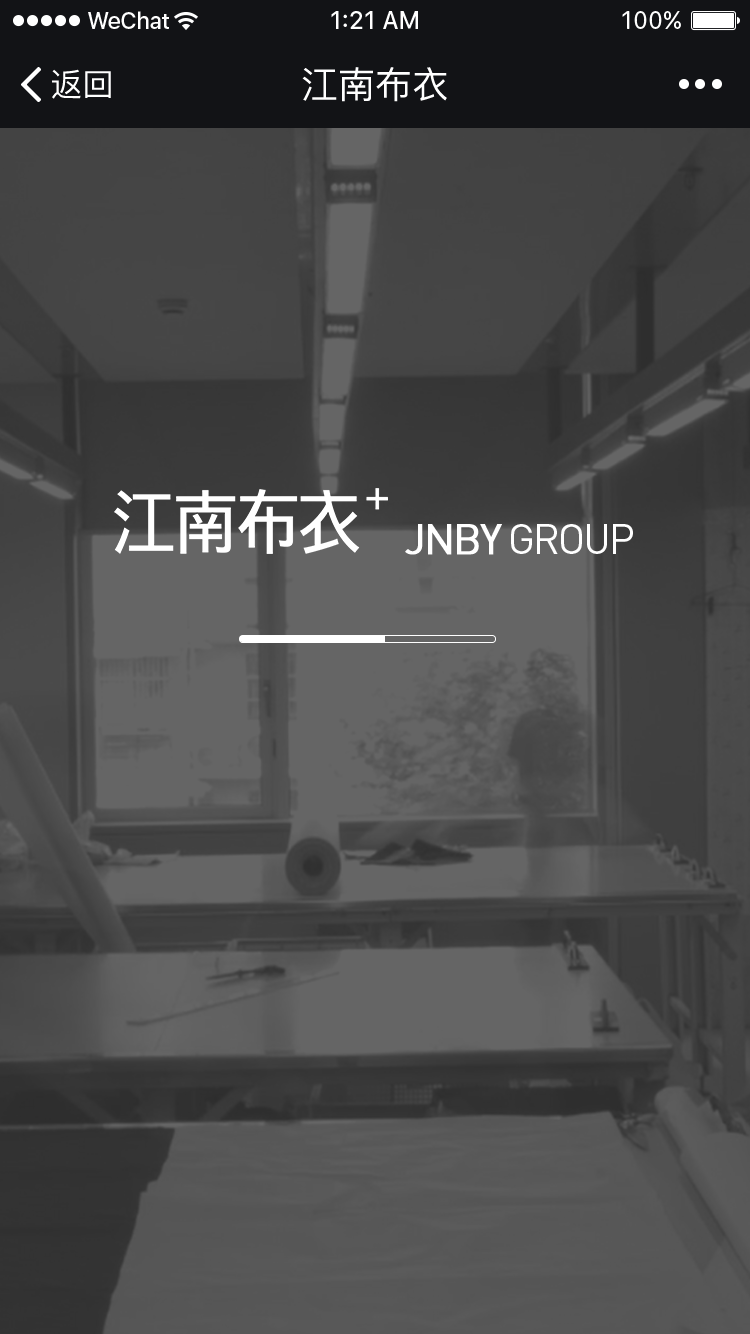
<style>
.page{position:relative;width:750px;height:1334px}
.page>*{position:absolute;margin:0}
.t1{font:32px "PingFang-SC-Medium";color:#ffffff}
.t2{font:37px "PingFang-SC-Medium";color:#ffffff}
.t3{font:41.3px "DINPro-Regular";letter-spacing:-0.05em;color:#ffffff;text-transform:uppercase}
.t4{font:41.3px "DINPro-Regular";letter-spacing:-0.05em;color:#ffffff;text-transform:uppercase;font-weight:bold}
</style>
<div class="page">
<p class="t1" style="left:52px;top:69px;width:59px;height:30px">返回</p>
<p class="t2" style="left:302px;top:67px;width:145px;height:35px">江南布衣</p>
<p class="t3" style="left:405px;top:524px;width:228px;height:31px"><span class="t4">JNBY</span> GROUP</p>
</div>
